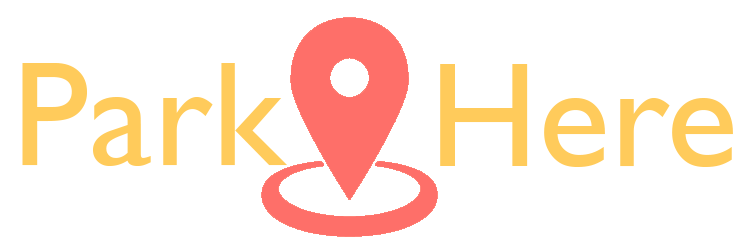
<style>
.page{position:relative;width:750px;height:248px;background:#ffffff}
.page>*{position:absolute;margin:0}
.t1{font:150px "GillSansMT";color:#ffcb5b}
</style>
<div class="page">
<p class="t1" style="left:22px;top:63px;width:265px;height:103px">Park</p>
<p class="t1" style="left:440px;top:64px;width:293px;height:103px">Here</p>
</div>
